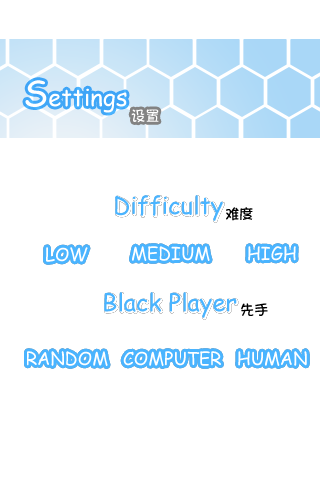
<style>
.page{position:relative;width:320px;height:480px;background:#ffffff}
.page>*{position:absolute;margin:0}
.t1{font:24px "ComicSansMS";color:#ffffff}
.t2{font:36px "ComicSansMS";color:#ffffff}
.t3{font:14px "Lolita-V2";color:#ffffff}
.t4{font:24px "ComicSansMS";color:#4ab4ff}
.t5{font:14px "Lolita-V2";color:#000000}
.t6{font:18px "ComicSansMS";color:#ffffff}
</style>
<div class="page">
<p class="t1" style="left:25px;top:80px;width:102px;height:33px"><span class="t2">S</span>ettings</p>
<p class="t3" style="left:131px;top:109px;width:28px;height:14px">设置</p>
<p class="t4" style="left:115px;top:195px;width:108px;height:26px">Difficulty</p>
<p class="t5" style="left:226px;top:207px;width:27px;height:14px">难度</p>
<p class="t6" style="left:132px;top:246px;width:78px;height:15px">MEDIUM</p>
<p class="t6" style="left:132px;top:246px;width:78px;height:15px">MEDIUM</p>
<p class="t6" style="left:248px;top:246px;width:48px;height:15px">HIGH</p>
<p class="t6" style="left:248px;top:246px;width:48px;height:15px">HIGH</p>
<p class="t6" style="left:46px;top:247px;width:42px;height:15px">LOW</p>
<p class="t6" style="left:46px;top:247px;width:42px;height:15px">LOW</p>
<p class="t4" style="left:104px;top:292px;width:133px;height:26px">Black Player</p>
<p class="t5" style="left:241px;top:303px;width:27px;height:13px">先手</p>
<p class="t6" style="left:27px;top:351px;width:81px;height:15px">RANDOM</p>
<p class="t6" style="left:27px;top:351px;width:81px;height:15px">RANDOM</p>
<p class="t6" style="left:123px;top:351px;width:98px;height:15px">COMPUTER</p>
<p class="t6" style="left:123px;top:351px;width:98px;height:15px">COMPUTER</p>
<p class="t6" style="left:238px;top:351px;width:69px;height:15px">HUMAN</p>
<p class="t6" style="left:238px;top:351px;width:69px;height:15px">HUMAN</p>
</div>
